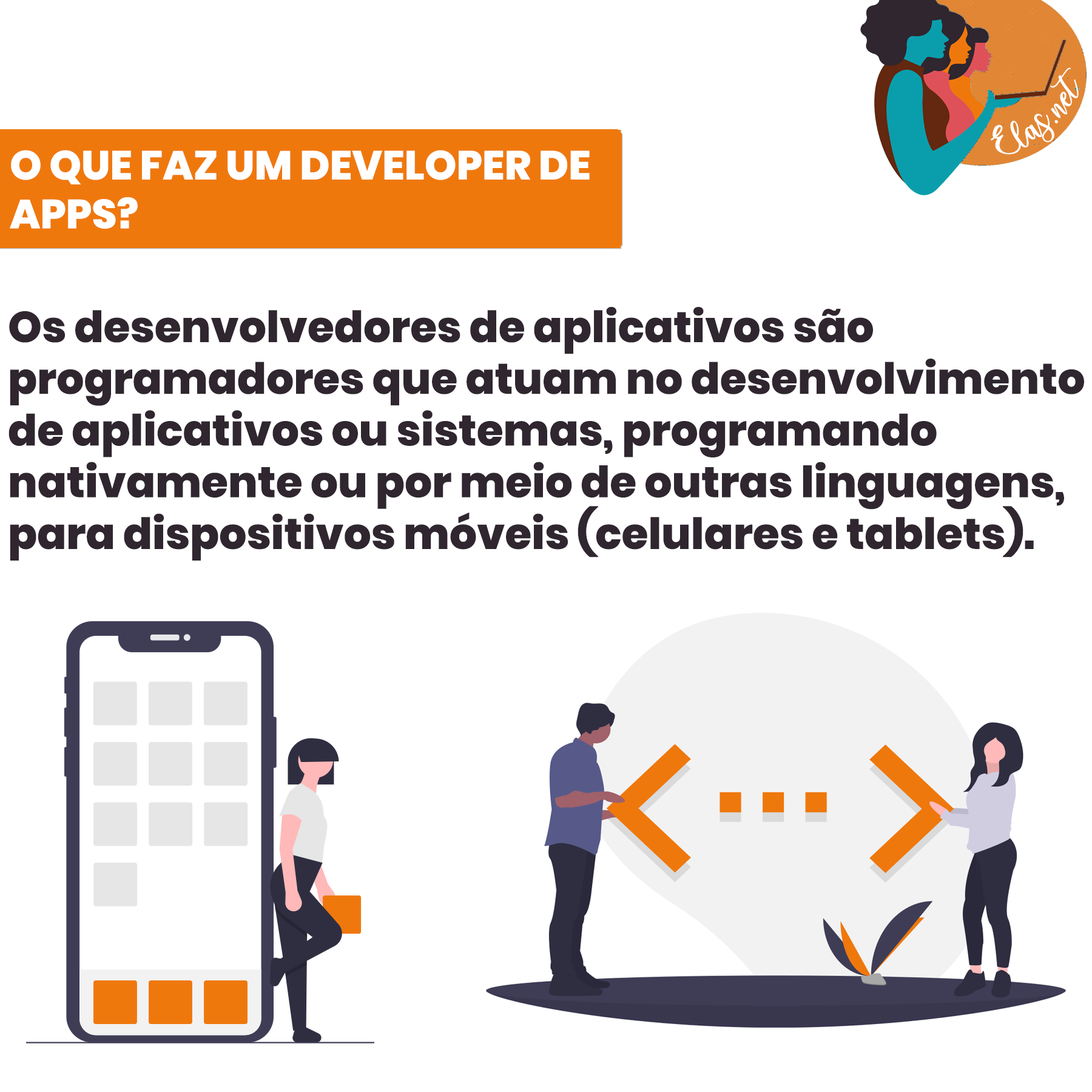
<style>
.page{position:relative;width:1092px;height:1092px;background:#ffffff}
.page>*{position:absolute;margin:0}
.t1{font:25px "charlinda-Regular";color:#ffffff;scale:1.18 1}
.t2{font:40.6px "Poppins-ExtraBold";color:#ffffff;text-transform:uppercase}
.t3{font:43.1px "Poppins-ExtraBold";color:#2f262f}
</style>
<div class="page">
<p class="t1" style="left:991px;top:67px;width:88px;height:88px;rotate:-42deg">Elas.net</p>
<p class="t2" style="left:10px;top:150px;width:580px;height:79px">O que faz um Developer de <br>Apps?</p>
<p class="t3" style="left:8px;top:306px;width:1076px;height:255px">Os desenvolvedores de aplicativos são  <br>programadores que atuam no desenvolvimento <br>de aplicativos ou sistemas, programando <br>nativamente ou por meio de outras linguagens, <br>para dispositivos móveis (celulares e tablets).</p>
</div>
